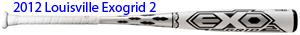
<style>
.page{position:relative;width:300px;height:35px;background:#ffffff}
.page>*{position:absolute;margin:0}
.t1{font:14px "MyriadPro-Regular";color:#0000ff}
</style>
<div class="page">
<p class="t1" style="left:13px;top:2px;width:143px;height:13px">2012 Louisville Exogrid 2</p>
</div>
